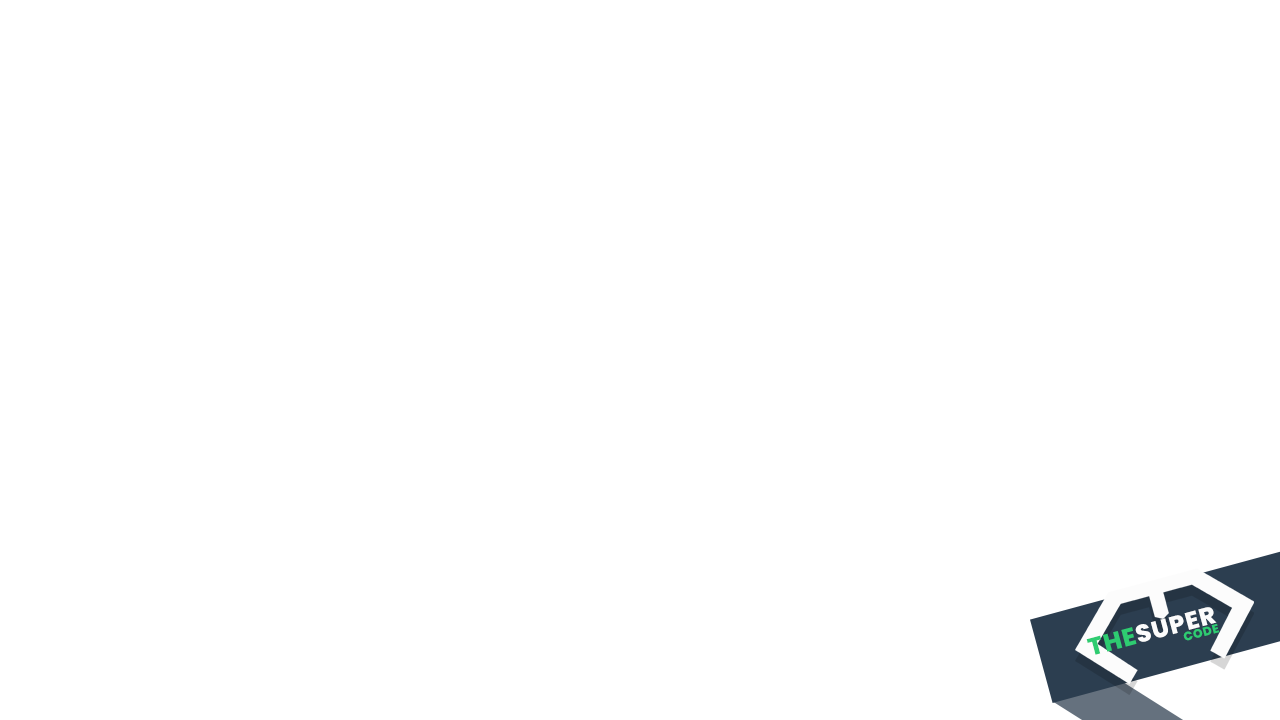
<style>
.page{position:relative;width:1280px;height:720px;background:#ffffff}
.page>*{position:absolute;margin:0}
.t1{font:24.5px "Poppins-ExtraBold";letter-spacing:0.04em;color:#fcfcfc}
.t2{font:24.5px "Poppins-ExtraBold";letter-spacing:0.04em;color:#2ecc71}
.t3{font:12.2px "Poppins-ExtraBold";letter-spacing:0.04em;color:#2ecc71}
</style>
<div class="page">
<p class="t1" style="left:1086px;top:607px;width:131px;height:48px;rotate:-15deg"><span class="t2">THE</span>SUPER</p>
<p class="t3" style="left:1183px;top:623px;width:37px;height:18px;rotate:-15deg">CODE</p>
</div>
